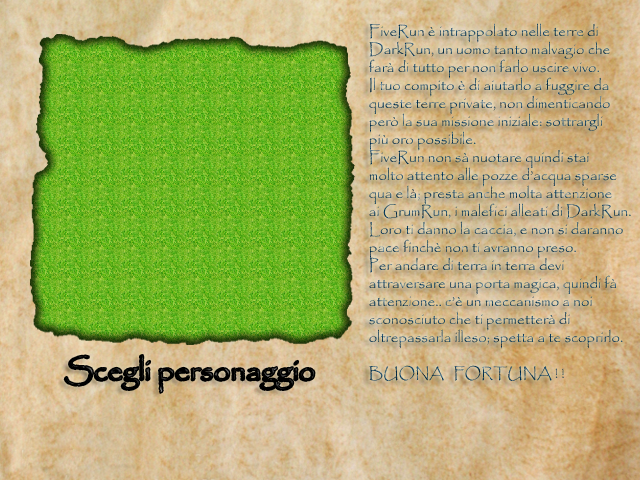
<style>
.page{position:relative;width:640px;height:480px}
.page>*{position:absolute;margin:0}
.t1{font:15px "Papyrus-Regular"}
.t2{font:30px "Papyrus-Regular";color:#000000}
</style>
<div class="page">
<p class="t1" style="left:369px;top:23px;width:262px;height:358px">FiveRun è intrappolato nelle terre di<br>DarkRun, un uomo tanto malvagio che<br>farà di tutto per non farlo uscire vivo.<br>Il tuo compito è di aiutarlo a fuggire da<br>queste terre private, non dimenticando<br>però la sua missione iniziale: sottrargli<br>più oro possibile.<br>FiveRun non sà nuotare quindi stai<br>molto attento alle pozze d’acqua sparse<br>qua e là; presta anche molta attenzione<br>ai GrumRun, i malefici alleati di DarkRun.<br>Loro ti danno la caccia, e non si daranno<br>pace finchè non ti avranno preso.<br>Per andare di terra in terra devi<br>attraversare una porta magica, quindi fà<br>attenzione.. c’è un meccanismo a noi<br>sconosciuto che ti permetterà di<br>oltrepassarla illeso; spetta a te scoprirlo.<br><br>BUONA   FORTUNA ! !</p>
<p class="t2" style="left:65px;top:355px;width:249px;height:38px">Scegli personaggio</p>
</div>
